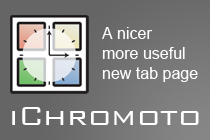
<style>
.page{position:relative;width:210px;height:140px}
.page>*{position:absolute;margin:0}
.t1{font:16px/20px "ArialMT";color:#ffffff}
.t2{font:34px "BankGothic-Light";color:#ffffff}
</style>
<div class="page">
<p class="t1" style="left:102px;top:27px;width:96px;height:55px">A nicer<br>more useful<br>new tab page</p>
<p class="t2" style="left:12px;top:107px;width:187px;height:18px">iChromoto</p>
</div>
